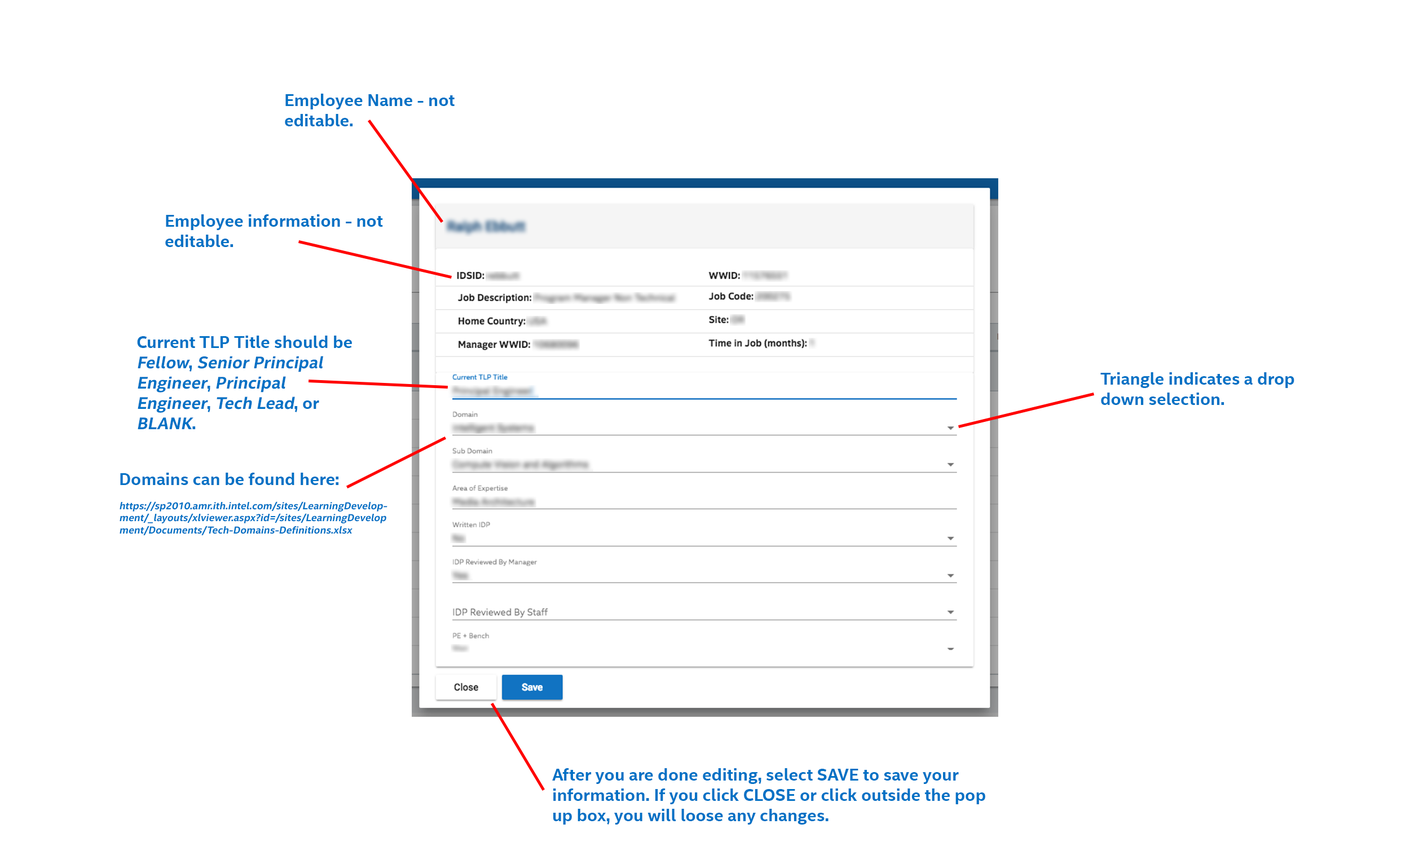
<style>
.page{position:relative;width:1410px;height:846px;background:#ffffff}
.page>*{position:absolute;margin:0}
.t1{font:16.9px "IntelClear-Bold";color:#0071c5}
.t2{font:16.9px "IntelClear-Bold";color:#0071c5;font-style:italic}
.t3{font:10.2px "IntelClear-Bold";color:#0071c5;font-style:italic}
</style>
<div class="page">
<p class="t1" style="left:285px;top:94px;width:170px;height:32px">Employee Name - not editable.</p>
<p class="t1" style="left:165px;top:214px;width:218px;height:33px">Employee information - not editable.</p>
<p class="t1" style="left:137px;top:336px;width:215px;height:93px">Current TLP Title should be <span class="t2">Fellow</span>, <span class="t2">Senior Principal Engineer</span>, <span class="t2">Principal Engineer</span>, <span class="t2">Tech Lead</span>, or <span class="t2">BLANK</span>.</p>
<p class="t1" style="left:1100px;top:372px;width:194px;height:33px">Triangle indicates a drop down selection.</p>
<p class="t3" style="left:120px;top:473px;width:267px;height:62px"><span class="t1">Domains can be found here: <br></span><br>https://sp2010.amr.ith.intel.com/sites/LearningDevelopment/_layouts/xlviewer.aspx?id=/sites/LearningDevelopment/Documents/Tech-Domains-Definitions.xlsx</p>
<p class="t1" style="left:552px;top:768px;width:433px;height:56px">After you are done editing, select SAVE to save your information. If you click CLOSE or click outside the pop up box, you will loose any changes.</p>
</div>
